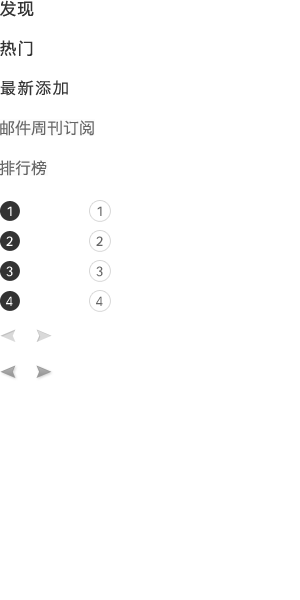
<style>
.page{position:relative;width:300px;height:600px;background:#ffffff}
.page>*{position:absolute;margin:0}
.t1{font:16px "MicrosoftYaHei";letter-spacing:0.1em;color:#333333}
.t2{font:16px "HiraginoSansGB-W3";letter-spacing:0.1em;color:#333333}
.t3{font:16px "HiraginoSansGB-W3";color:#666666}
</style>
<div class="page">
<p class="t1" style="left:0px;top:0px;width:34px;height:17px">发现</p>
<p class="t1" style="left:0px;top:40px;width:33px;height:16px">热门</p>
<p class="t2" style="left:0px;top:80px;width:68px;height:16px">最新添加</p>
<p class="t3" style="left:0px;top:120px;width:94px;height:16px">邮件周刊订阅</p>
<p class="t3" style="left:0px;top:160px;width:47px;height:16px">排行榜</p>
</div>
